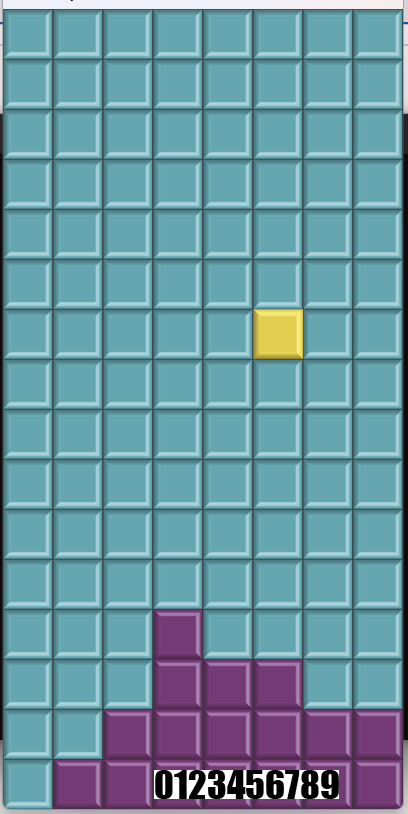
<style>
.page{position:relative;width:408px;height:814px;background:#66a6b1}
.page>*{position:absolute;margin:0}
.t1{font:37.3px "Impact";color:#000000}
</style>
<div class="page">
<p class="t1" style="left:155px;top:770px;width:184px;height:29px">0123456789</p>
</div>
